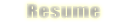
<style>
.page{position:relative;width:128px;height:24px;background:#ffffff}
.page>*{position:absolute;margin:0}
.t1{font:18px "Impact";color:#c6c6b9;scale:1.25 1}
</style>
<div class="page">
<p class="t1" style="left:27px;top:3px;width:74px;height:16px">Resume</p>
</div>
